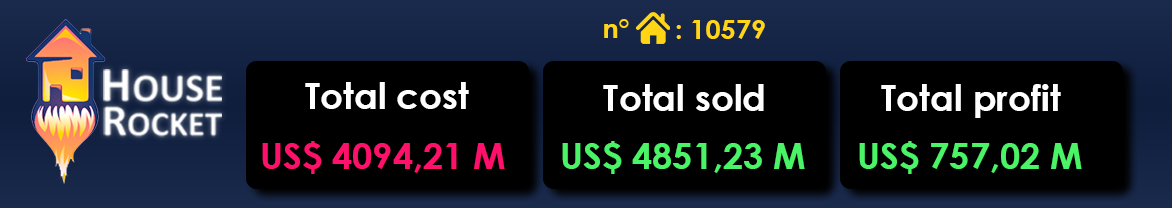
<style>
.page{position:relative;width:1172px;height:208px;background:#000000}
.page>*{position:absolute;margin:0}
.t1{font:27.1px "CenturyGothic-Bold";color:#ffd516}
.t2{font:36px "CenturyGothic-Bold";color:#ffffff}
.t3{font:36px "CenturyGothic-Bold";color:#ff106a}
.t4{font:36px "CenturyGothic-Bold";color:#4bf467}
</style>
<div class="page">
<p class="t1" style="left:604px;top:19px;width:25px;height:19px">n°</p>
<p class="t1" style="left:676px;top:20px;width:89px;height:19px">: 10579</p>
<p class="t2" style="left:305px;top:82px;width:164px;height:27px">Total cost</p>
<p class="t2" style="left:603px;top:84px;width:161px;height:27px">Total sold</p>
<p class="t2" style="left:881px;top:84px;width:180px;height:34px">Total profit</p>
<p class="t3" style="left:262px;top:141px;width:243px;height:33px">US$ 4094,21 M</p>
<p class="t4" style="left:562px;top:141px;width:243px;height:33px">US$ 4851,23 M</p>
<p class="t4" style="left:859px;top:141px;width:223px;height:33px">US$ 757,02 M</p>
</div>
